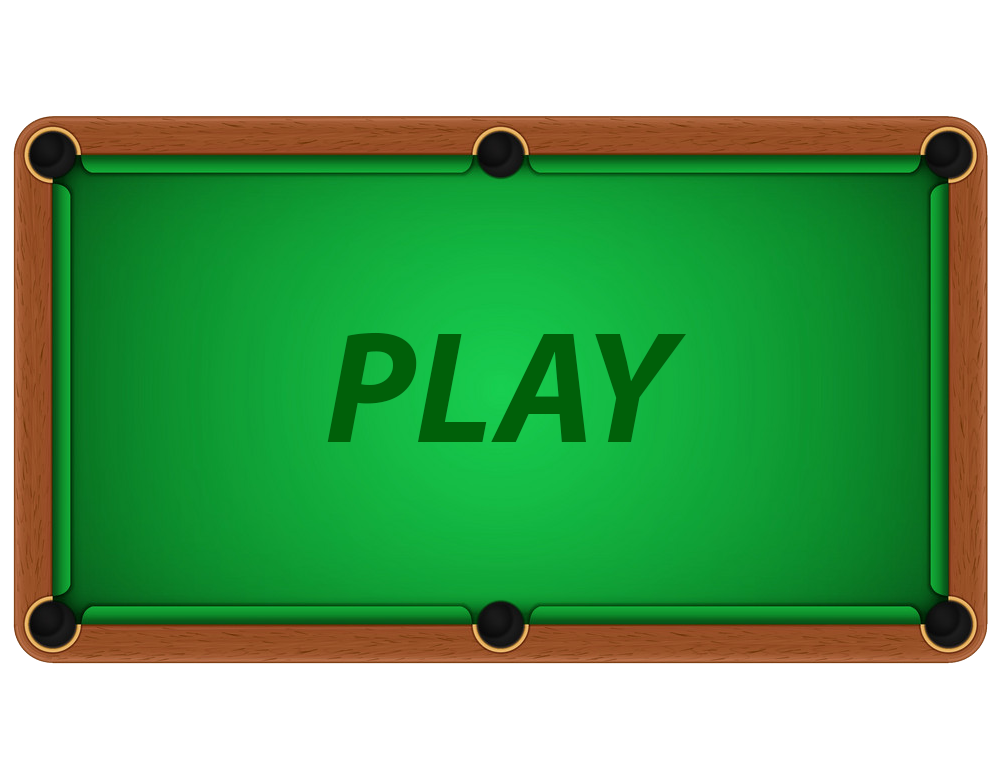
<style>
.page{position:relative;width:1000px;height:780px;background:#ffffff}
.page>*{position:absolute;margin:0}
.t1{font:160px "MyriadPro-BoldIt";color:#006009}
</style>
<div class="page">
<p class="t1" style="left:327px;top:332px;width:359px;height:110px">PLAY</p>
</div>
